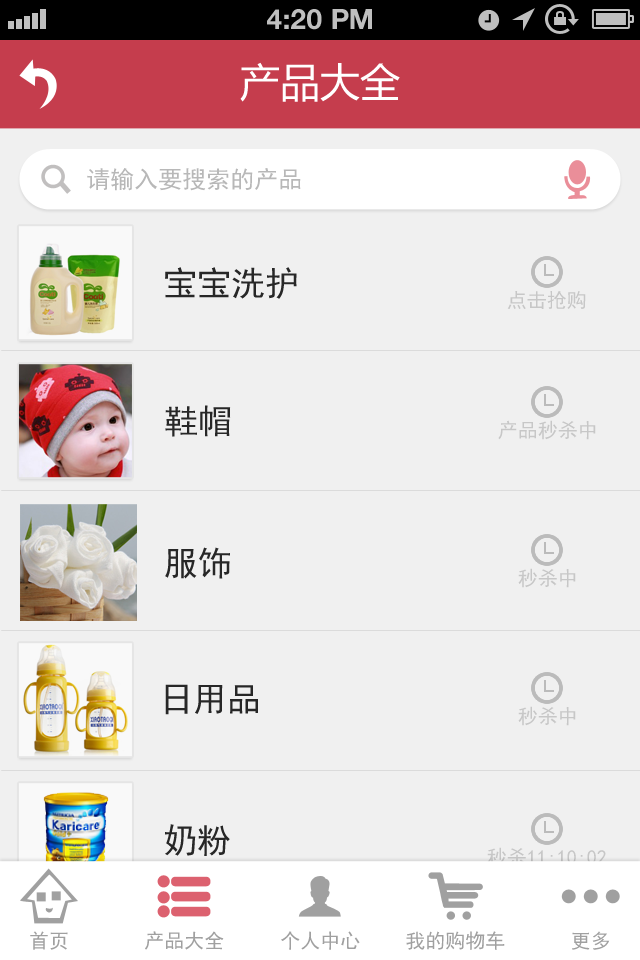
<style>
.page{position:relative;width:640px;height:960px;background:#f0f0f0}
.page>*{position:absolute;margin:0}
.t1{font:28px "HelveticaNeue-Bold";color:#bfbfbf;text-transform:uppercase}
.t2{font:40px "MicrosoftYaHei";color:#ffffff;text-transform:uppercase}
.t3{font:24px "SimHei";color:#b8b8b8}
.t4{font:34px "SimHei";color:#272727}
.t5{font:20px "SimHei";color:#c7c7c7}
.t6{font:20px "SimHei";color:#a0a0a0}
</style>
<div class="page">
<p class="t1" style="left:267px;top:9px;width:105px;height:21px">4:20 PM</p>
<p class="t2" style="left:240px;top:62px;width:160px;height:40px">产品大全</p>
<p class="t3" style="left:87px;top:168px;width:214px;height:23px">请输入要搜索的产品</p>
<p class="t4" style="left:165px;top:267px;width:132px;height:32px">宝宝洗护</p>
<p class="t5" style="left:507px;top:291px;width:79px;height:18px">点击抢购</p>
<p class="t4" style="left:165px;top:405px;width:66px;height:32px">鞋帽</p>
<p class="t5" style="left:498px;top:420px;width:98px;height:20px">产品秒杀中</p>
<p class="t4" style="left:165px;top:547px;width:65px;height:32px">服饰</p>
<p class="t5" style="left:518px;top:568px;width:58px;height:20px">秒杀中</p>
<p class="t4" style="left:165px;top:684px;width:93px;height:31px">日用品</p>
<p class="t5" style="left:518px;top:706px;width:58px;height:20px">秒杀中</p>
<p class="t4" style="left:165px;top:824px;width:65px;height:32px">奶粉</p>
<p class="t5" style="left:487px;top:847px;width:119px;height:20px">秒杀11:10:02</p>
<p class="t6" style="left:30px;top:931px;width:38px;height:19px">首页</p>
<p class="t6" style="left:145px;top:931px;width:79px;height:19px">产品大全</p>
<p class="t6" style="left:281px;top:931px;width:79px;height:19px">个人中心</p>
<p class="t6" style="left:406px;top:931px;width:99px;height:19px">我的购物车</p>
<p class="t6" style="left:572px;top:931px;width:38px;height:19px">更多</p>
</div>
